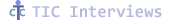
<style>
.page{position:relative;width:178px;height:24px;background:#ffffff}
.page>*{position:absolute;margin:0}
.t1{font:23px "Consolas-Bold";color:#5965b1}
.t2{font:28px "Consolas-Bold";color:#7e8ce6}
.t3{font:17px "Consolas-Bold";color:#b6bade}
.t4{font:14px "Consolas-Bold";color:#7a99ac}
</style>
<div class="page">
<p class="t1" style="left:13px;top:5px;width:11px;height:15px">T</p>
<p class="t2" style="left:15px;top:0px;width:6px;height:6px">.</p>
<p class="t3" style="left:32px;top:4px;width:130px;height:14px">TIC Interviews</p>
<p class="t4" style="left:9px;top:8px;width:7px;height:9px">c</p>
<p class="t4" style="left:19px;top:8px;width:6px;height:9px">c</p>
</div>
